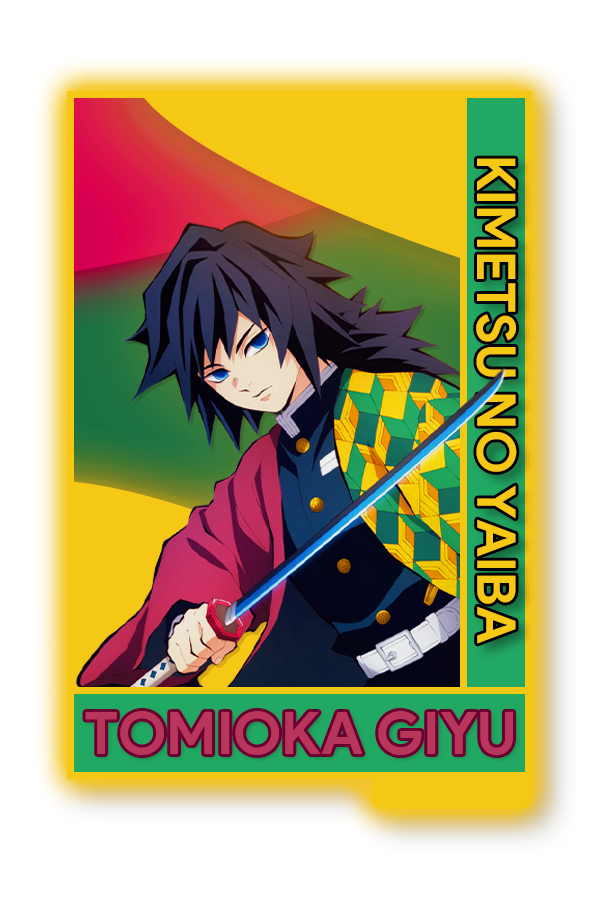
<style>
.page{position:relative;width:600px;height:900px;background:#ffffff}
.page>*{position:absolute;margin:0}
.t1{font:53.3px "ProductSans-Bold";color:#f5c816}
.t2{font:58.8px "ProductSans-Bold";color:#a94b69}
</style>
<div class="page">
<p class="t1" style="left:476px;top:158px;width:41px;height:486px;rotate:90deg">KIMETSU NO YAIBA</p>
<p class="t2" style="left:85px;top:711px;width:428px;height:44px">TOMIOKA GIYU</p>
</div>
